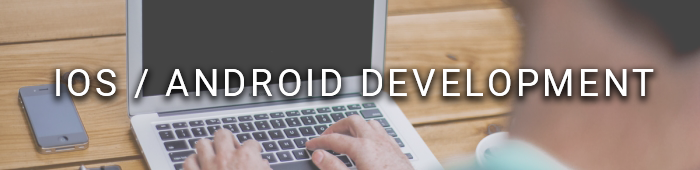
<style>
.page{position:relative;width:700px;height:170px}
.page>*{position:absolute;margin:0}
.t1{font:37px "Roboto-Regular";letter-spacing:0.1em;color:#ffffff}
</style>
<div class="page">
<p class="t1" style="left:56px;top:69px;width:598px;height:29px">IOS / ANDROID DEVELOPMENT</p>
</div>
